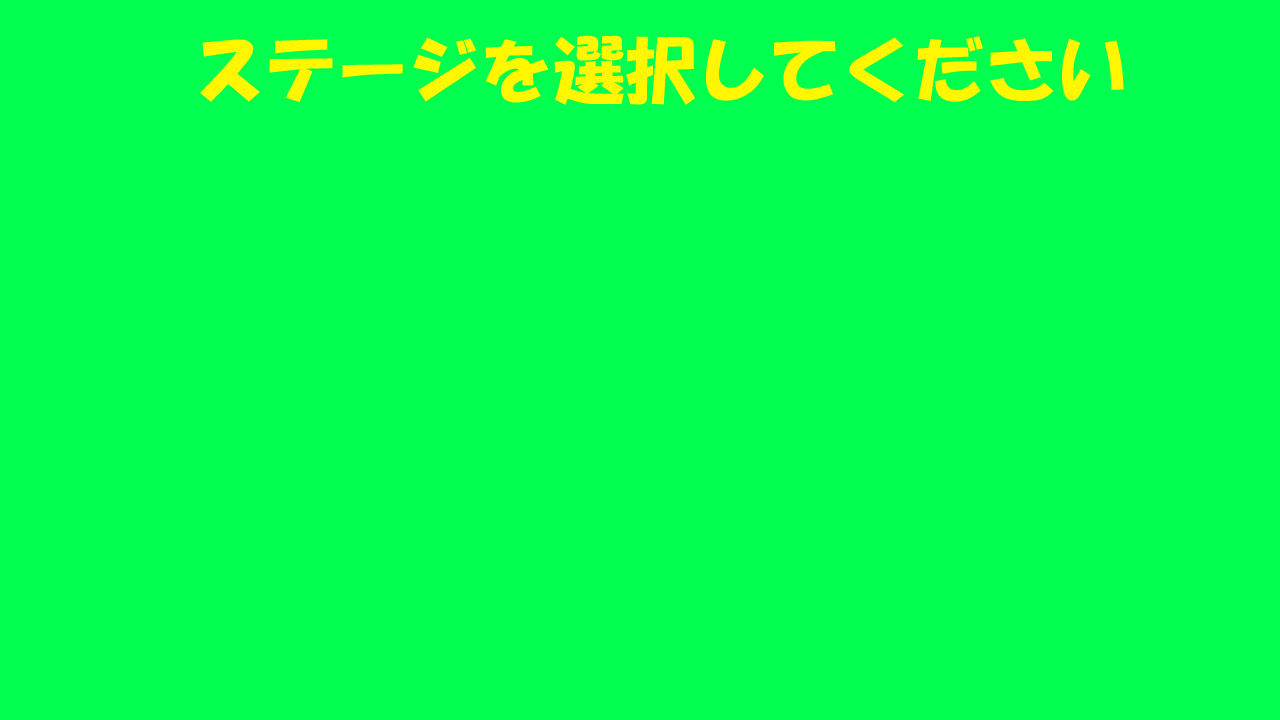
<style>
.page{position:relative;width:1280px;height:720px;background:#00ff4e}
.page>*{position:absolute;margin:0}
.t1{font:72px "HGSSoeiKakupoptai";color:#fff600}
</style>
<div class="page">
<p class="t1" style="left:200px;top:35px;width:924px;height:70px">ステージを選択してください</p>
</div>
